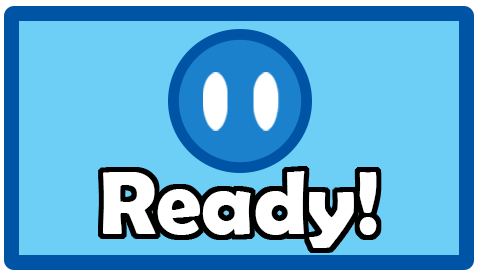
<style>
.page{position:relative;width:480px;height:270px;background:#6dcff6}
.page>*{position:absolute;margin:0}
.t1{font:90px "BerlinSansFBDemi-Bold";color:#ffffff}
</style>
<div class="page">
<p class="t1" style="left:103px;top:171px;width:274px;height:77px">Ready!</p>
</div>
